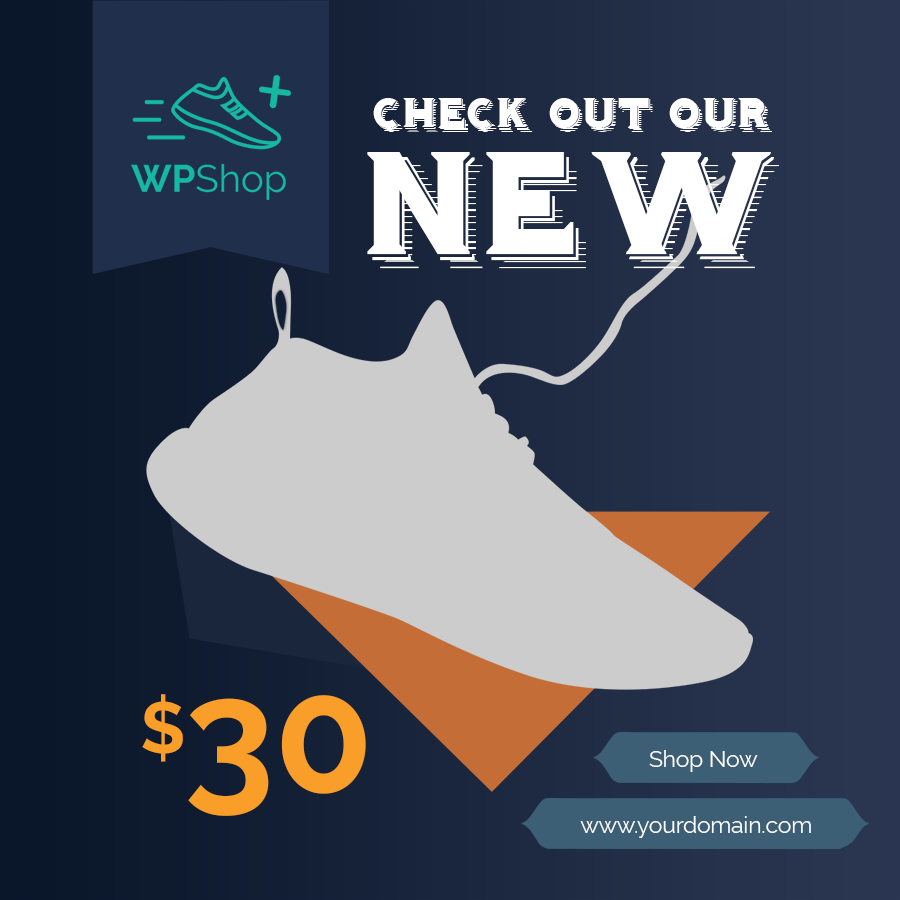
<style>
.page{position:relative;width:900px;height:900px}
.page>*{position:absolute;margin:0}
.t1{font:37.5px "Hominis";color:#ffffff}
.t2{font:127.5px "Hominis";color:#ffffff}
.t3{font:72px "Raleway-Bold";color:#f99e28}
.t4{font:162px "Raleway-Bold";color:#f99e28}
.t5{font:22.5px "Raleway-Regular";color:#ffffff}
</style>
<div class="page">
<p class="t1" style="left:373px;top:98px;width:399px;height:34px">CHECK OUT OUR</p>
<p class="t2" style="left:367px;top:152px;width:413px;height:117px">NEW</p>
<p class="t3" style="left:142px;top:694px;width:41px;height:68px">$</p>
<p class="t4" style="left:188px;top:695px;width:178px;height:121px">30</p>
<p class="t5" style="left:649px;top:750px;width:109px;height:22px">Shop Now</p>
<p class="t5" style="left:580px;top:816px;width:231px;height:22px">www.yourdomain.com</p>
</div>
